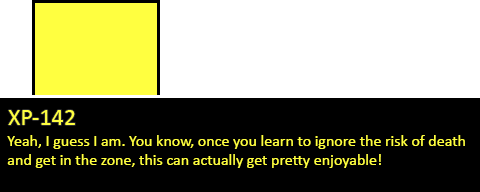
<style>
.page{position:relative;width:480px;height:192px;background:#000000}
.page>*{position:absolute;margin:0}
.t1{font:24px "Calibri";color:#ffff40}
.t2{font:16px "Calibri";color:#ffff40}
</style>
<div class="page">
<p class="t1" style="left:8px;top:110px;width:67px;height:15px">XP-142</p>
<p class="t2" style="left:7px;top:135px;width:458px;height:33px">Yeah, I guess I am. You know, once you learn to ignore the risk of death<br>and get in the zone, this can actually get pretty enjoyable!</p>
</div>
